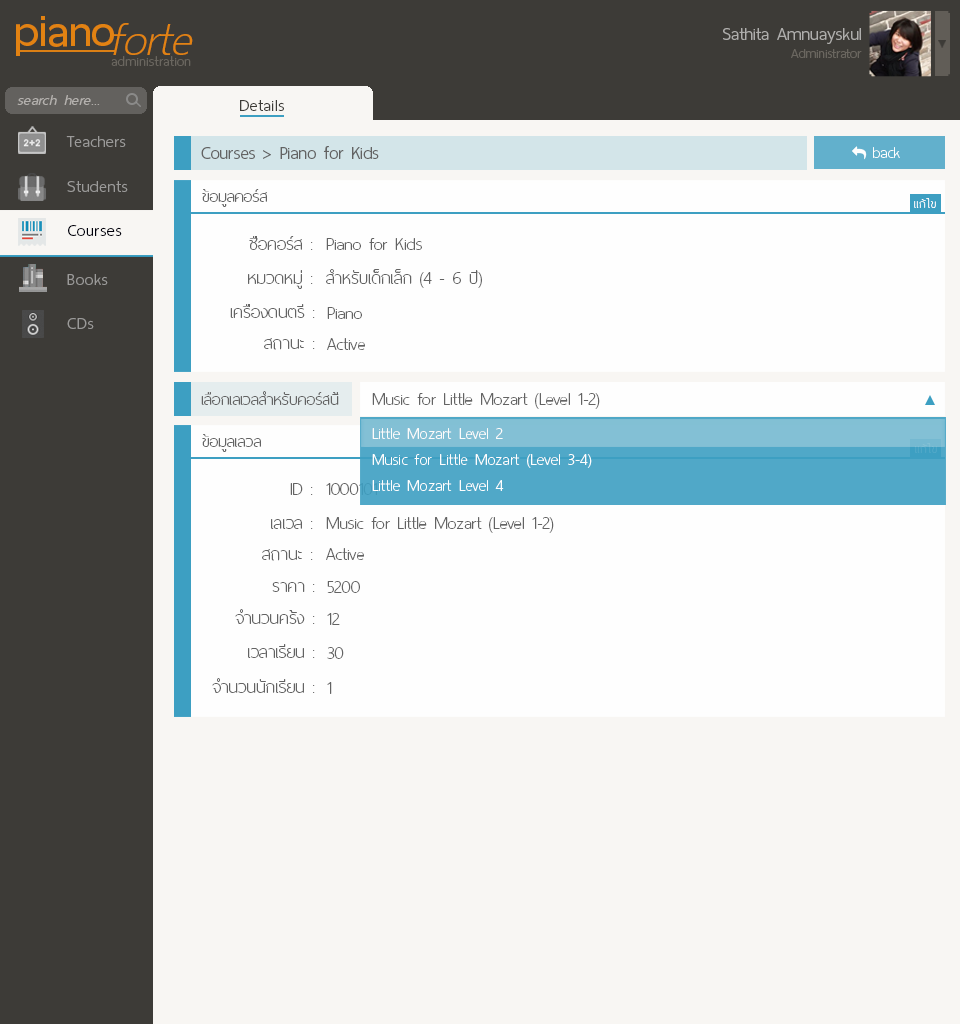
<style>
.page{position:relative;width:960px;height:1024px;background:#f8f6f3}
.page>*{position:absolute;margin:0}
.t1{font:60px "ThaiSansNeue-SemiBold";letter-spacing:-0.005em;color:#e28212}
.t2{font:62px "ThaiSansNeue-ExtraLightItalic";letter-spacing:-0.005em;color:#e28212}
.t3{font:24px "ThaiSansNeue-Light";letter-spacing:-0.005em;color:#afaeac}
.t4{font:18px "ThaiSansNeue-Light";letter-spacing:-0.005em;color:#6a665f}
.t5{font:18.5px "ThaiSansNeue-ExtraLight";letter-spacing:0.025em;color:#6a665f}
.t6{font:20px "ThaiSansNeue-LightItalic";letter-spacing:0.025em;color:#b4b1ae}
.t7{font:22px "ThaiSansNeue-Light";letter-spacing:0.025em;color:#3d3b37}
.t8{font:22px "ThaiSansNeue-Light";letter-spacing:0.025em;color:#9b9a99}
.t9{font:24px "ThaiSansNeue-Light";letter-spacing:-0.005em;color:#636363}
.t10{font:22px "ThaiSansNeue-UltraLight";color:#fefefe}
.t11{font:22px "ThaiSansNeue-UltraLight";color:#636363}
.t12{font:16px "ThaiSansNeue-UltraLight";letter-spacing:0.025em;color:#fefefe}
.t13{font:22px "ThaiSansNeue-Light";letter-spacing:0.025em;color:#00000b}
.t14{font:24px "ThaiSansNeue-UltraLight";color:#636363}
.t15{font:22px "ThaiSansNeue-UltraLight";letter-spacing:0.01em;color:#fefefe}
.t16{font:24px "ThaiSansNeue-UltraLight"}
</style>
<div class="page">
<p class="t1" style="left:16px;top:16px;width:98px;height:40px">piano</p>
<p class="t2" style="left:113px;top:23px;width:80px;height:32px">forte</p>
<p class="t3" style="left:723px;top:28px;width:138px;height:16px">Sathita Amnuayskul</p>
<p class="t4" style="left:791px;top:49px;width:71px;height:9px">Administrator</p>
<p class="t5" style="left:111px;top:56px;width:80px;height:10px">administration</p>
<p class="t6" style="left:17px;top:95px;width:83px;height:10px">search here...</p>
<p class="t7" style="left:240px;top:100px;width:44px;height:11px">Details</p>
<p class="t8" style="left:66px;top:136px;width:60px;height:11px">Teachers</p>
<p class="t9" style="left:201px;top:146px;width:178px;height:13px">Courses &gt; Piano for Kids</p>
<p class="t10" style="left:873px;top:147px;width:27px;height:11px">back</p>
<p class="t8" style="left:67px;top:181px;width:61px;height:11px">Students</p>
<p class="t11" style="left:202px;top:189px;width:65px;height:18px">ข้อมูลคอร์ส</p>
<p class="t12" style="left:914px;top:198px;width:22px;height:10px">แก้ไข</p>
<p class="t13" style="left:68px;top:225px;width:54px;height:11px">Courses</p>
<p class="t14" style="left:249px;top:236px;width:64px;height:14px">ชื่อคอร์ส :</p>
<p class="t14" style="left:326px;top:238px;width:96px;height:12px">Piano for Kids</p>
<p class="t14" style="left:248px;top:270px;width:65px;height:19px">หมวดหมู่ :</p>
<p class="t14" style="left:326px;top:269px;width:156px;height:19px">สำหรับเด็กเล็ก (4 - 6 ปี)</p>
<p class="t8" style="left:67px;top:274px;width:41px;height:11px">Books</p>
<p class="t14" style="left:230px;top:304px;width:85px;height:14px">เครื่องดนตรี :</p>
<p class="t8" style="left:67px;top:318px;width:27px;height:11px">CDs</p>
<p class="t14" style="left:327px;top:307px;width:35px;height:12px">Piano</p>
<p class="t14" style="left:264px;top:338px;width:51px;height:12px">สถานะ :</p>
<p class="t14" style="left:327px;top:338px;width:38px;height:12px">Active</p>
<p class="t11" style="left:201px;top:391px;width:138px;height:14px">เลือกเลเวลสำหรับคอร์สนี้</p>
<p class="t14" style="left:372px;top:393px;width:228px;height:16px">Music for Little Mozart (Level 1-2)</p>
<p class="t11" style="left:202px;top:434px;width:59px;height:18px">ข้อมูลเลวล</p>
<p class="t15" style="left:372px;top:428px;width:131px;height:11px">Little Mozart Level 2</p>
<p class="t15" style="left:372px;top:454px;width:220px;height:14px">Music for Little Mozart (Level 3-4)</p>
<p class="t14" style="left:290px;top:483px;width:23px;height:12px">ID :</p>
<p class="t16" style="left:326px;top:483px;width:51px;height:12px">1000101</p>
<p class="t15" style="left:372px;top:480px;width:132px;height:11px">Little Mozart Level 4</p>
<p class="t14" style="left:271px;top:519px;width:42px;height:10px">เลเวล :</p>
<p class="t14" style="left:326px;top:517px;width:228px;height:16px">Music for Little Mozart (Level 1-2)</p>
<p class="t14" style="left:262px;top:549px;width:51px;height:12px">สถานะ :</p>
<p class="t14" style="left:326px;top:548px;width:38px;height:12px">Active</p>
<p class="t14" style="left:272px;top:582px;width:43px;height:10px">ราคา :</p>
<p class="t14" style="left:327px;top:581px;width:33px;height:12px">5200</p>
<p class="t14" style="left:235px;top:609px;width:80px;height:15px">จำนวนครั้ง :</p>
<p class="t14" style="left:327px;top:613px;width:13px;height:12px">12</p>
<p class="t14" style="left:248px;top:644px;width:67px;height:14px">เวลาเรียน :</p>
<p class="t14" style="left:327px;top:647px;width:17px;height:12px">30</p>
<p class="t14" style="left:212px;top:678px;width:103px;height:15px">จำนวนนักเรียน :</p>
<p class="t14" style="left:327px;top:682px;width:5px;height:12px">1</p>
</div>
